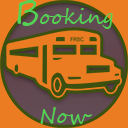
<style>
.page{position:relative;width:128px;height:128px;background:#ec7c21}
.page>*{position:absolute;margin:0}
.t1{font:20.8px "SegoeScript";color:#53d253}
.t2{font:33.3px "SegoeScript";color:#53d253}
</style>
<div class="page">
<p class="t1" style="left:17px;top:0px;width:96px;height:29px"><span class="t2">B</span>ooking</p>
<p class="t1" style="left:40px;top:107px;width:52px;height:18px">Now</p>
</div>
